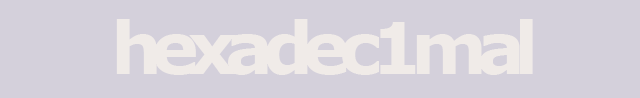
<style>
.page{position:relative;width:640px;height:98px;background:#d4d0db}
.page>*{position:absolute;margin:0}
.t1{font:72px "Verdana-Bold";letter-spacing:-0.15em;color:#f0ebe8}
</style>
<div class="page">
<p class="t1" style="left:116px;top:19px;width:417px;height:56px">hexadec1mal</p>
</div>
